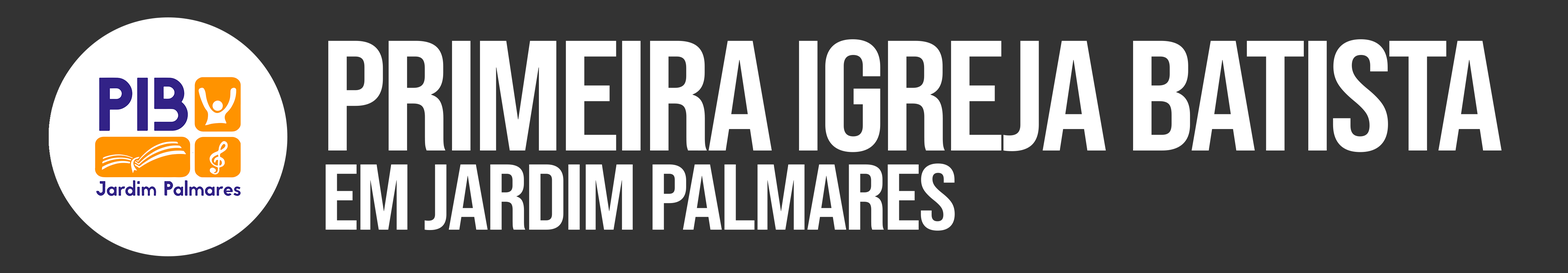
<style>
.page{position:relative;width:1568px;height:273px;background:#333333}
.page>*{position:absolute;margin:0}
.t1{font:156.4px "BebasNeue-Regular";letter-spacing:-0.025em;color:#ffffff;scale:1.07 1}
.t2{font:93.2px "BebasNeue-Regular";letter-spacing:-0.025em;color:#ffffff;scale:1.1 1}
</style>
<div class="page">
<p class="t1" style="left:328px;top:39px;width:1174px;height:113px">PRIMEIRA IGREJA BATISTA</p>
<p class="t2" style="left:326px;top:163px;width:629px;height:67px">EM JARDIM PALMARES</p>
</div>
